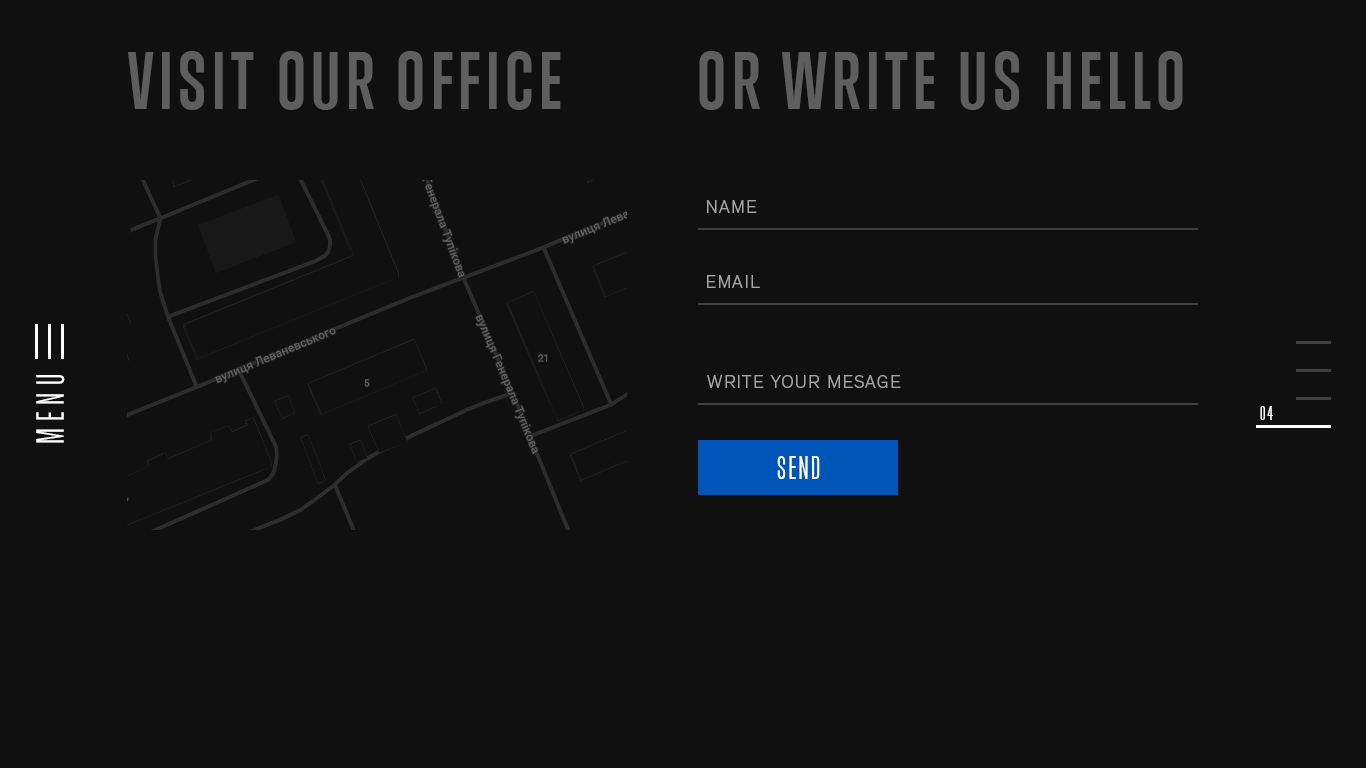
<style>
.page{position:relative;width:1366px;height:768px;background:#101010}
.page>*{position:absolute;margin:0}
.t1{font:75px "TrumpGothicWest-Bold";letter-spacing:0.075em;color:#5e5e5e;text-transform:uppercase}
.t2{font:18px "Theinhardt-Light";letter-spacing:0.075em;color:#a6a6a6;text-transform:uppercase}
.t3{font:36px "TrumpGothicWest";letter-spacing:0.2em;color:#ffffff;text-transform:uppercase}
.t4{font:18px "TrumpGothicWest";letter-spacing:0.1em;color:#ffffff;text-transform:uppercase}
.t5{font:30px "TrumpGothicWest";letter-spacing:0.075em;color:#ffffff;text-transform:uppercase}
</style>
<div class="page">
<p class="t1" style="left:128px;top:51px;width:433px;height:59px">visit our office</p>
<p class="t1" style="left:699px;top:51px;width:484px;height:59px">or write us hello</p>
<p class="t2" style="left:707px;top:200px;width:50px;height:13px">Name</p>
<p class="t2" style="left:707px;top:275px;width:53px;height:13px">Email</p>
<p class="t3" style="left:36px;top:375px;width:29px;height:68px;rotate:-90deg">menu</p>
<p class="t2" style="left:707px;top:375px;width:194px;height:13px">Write your mesage</p>
<p class="t4" style="left:1260px;top:406px;width:13px;height:14px">04</p>
<p class="t5" style="left:777px;top:455px;width:43px;height:23px">send</p>
<p class="t5" style="left:777px;top:456px;width:43px;height:23px">send</p>
</div>
